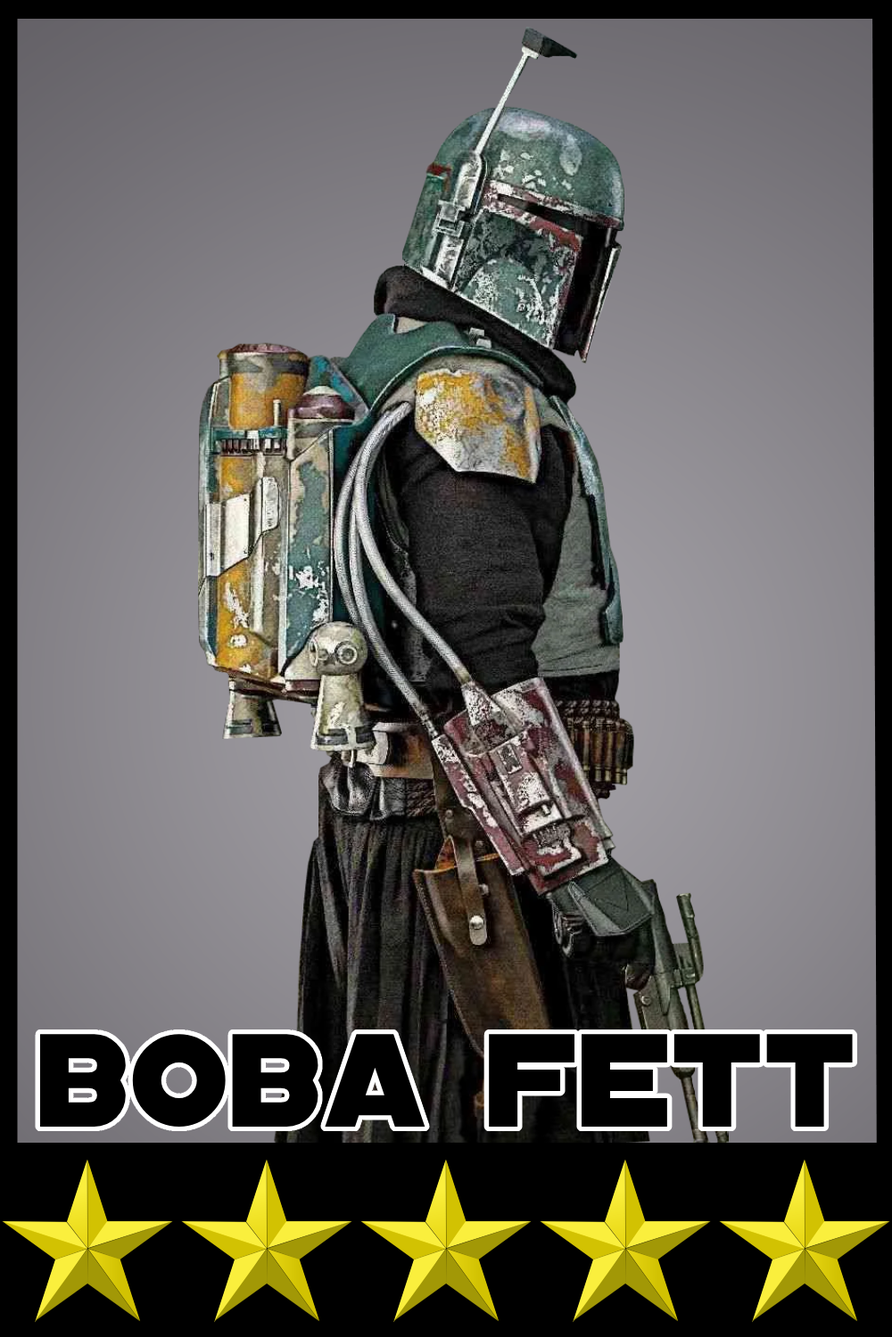
<style>
.page{position:relative;width:892px;height:1337px}
.page>*{position:absolute;margin:0}
.t1{font:142.4px "DistantGalaxy";color:#000000}
</style>
<div class="page">
<p class="t1" style="left:39px;top:1034px;width:813px;height:93px">boba fett</p>
</div>
